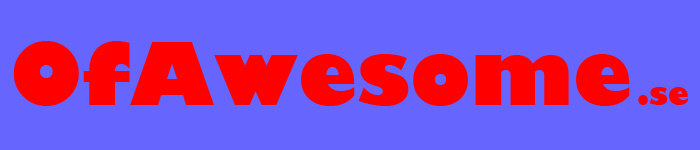
<style>
.page{position:relative;width:700px;height:150px;background:#6666ff}
.page>*{position:absolute;margin:0}
.t1{font:85px "GillSans-UltraBold";color:#ff0000}
.t2{font:30px "GillSans-UltraBold";color:#ff0000}
</style>
<div class="page">
<p class="t1" style="left:13px;top:41px;width:617px;height:65px">OfAwesome</p>
<p class="t2" style="left:638px;top:87px;width:50px;height:18px">.se</p>
</div>
